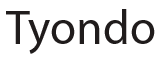
<style>
.page{position:relative;width:159px;height:60px;background:#ffffff}
.page>*{position:absolute;margin:0}
.t1{font:48px "MyriadPro-Regular";color:#201c1c}
</style>
<div class="page">
<p class="t1" style="left:6px;top:9px;width:149px;height:45px">Tyondo</p>
</div>
